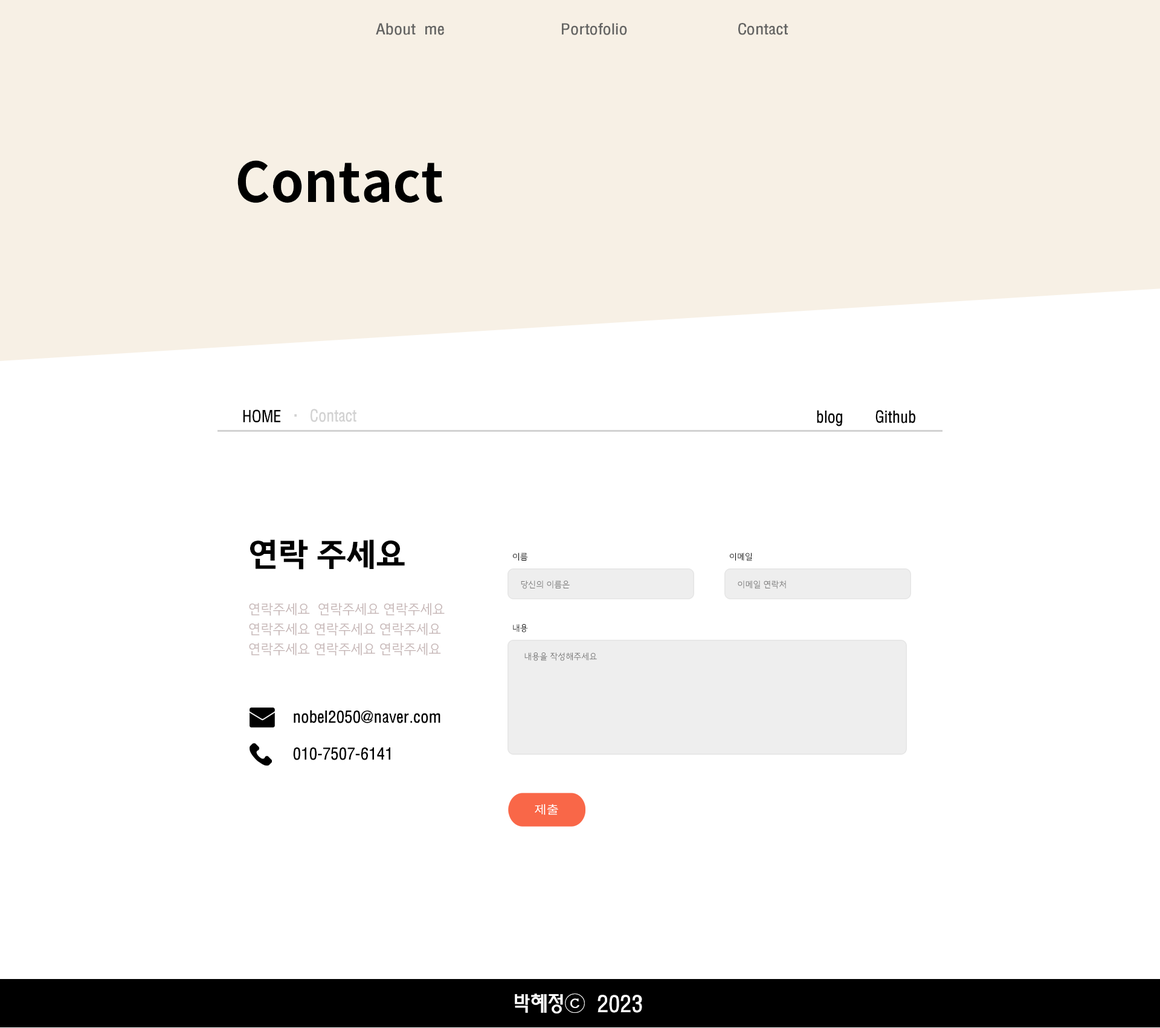
<style>
.page{position:relative;width:1160px;height:1028px;background:#ffffff}
.page>*{position:absolute;margin:0}
.t1{font:13.9px "MoeumTR-HM";letter-spacing:-0.01em;color:#636362;scale:1.14 1}
.t2{font:55px "NotoSansKR-Bold";letter-spacing:0.005em;color:#000000;scale:0.97 1}
.t3{font:15.1px "MoeumTR-HM";letter-spacing:-0.01em;color:#000000;scale:0.97 1}
.t4{font:15.1px "MoeumTR-HM";letter-spacing:-0.01em;color:#d2d2d2;scale:0.97 1}
.t5{font:33.2px "KimjungchulGothic-Bold";letter-spacing:-0.01em;color:#000000;text-transform:uppercase}
.t6{font:8.8px "KimjungchulGothic-Regular";letter-spacing:-0.01em;color:#010101}
.t7{font:8.8px "KimjungchulGothic-Regular";letter-spacing:-0.01em;color:#747373}
.t8{font:13.9px/20.1px "KimjungchulGothic-Regular";letter-spacing:-0.01em;color:#c8b9b9}
.t9{font:15.1px "MoeumTR-HM";letter-spacing:-0.01em;color:#000000}
.t10{font:21.2px "MoeumTR-HM";letter-spacing:-0.01em;color:#ffffff}
</style>
<div class="page">
<p class="t1" style="left:376px;top:23px;width:68px;height:12px">About me</p>
<p class="t1" style="left:562px;top:23px;width:65px;height:12px">Portofolio</p>
<p class="t1" style="left:739px;top:23px;width:50px;height:12px">Contact</p>
<p class="t2" style="left:238px;top:160px;width:205px;height:43px">Contact</p>
<p class="t3" style="left:243px;top:409px;width:38px;height:13px">HOME</p>
<p class="t4" style="left:294px;top:409px;width:63px;height:13px">·  Contact</p>
<p class="t3" style="left:817px;top:410px;width:99px;height:16px">blog    Github</p>
<p class="t5" style="left:250px;top:539px;width:155px;height:30px">연락 주세요</p>
<p class="t6" style="left:513px;top:552px;width:15px;height:8px">이름</p>
<p class="t6" style="left:730px;top:552px;width:23px;height:9px">이메일</p>
<p class="t7" style="left:521px;top:580px;width:49px;height:9px">당신의 이름은</p>
<p class="t7" style="left:738px;top:580px;width:48px;height:9px">이메일 연락처</p>
<p class="t8" style="left:249px;top:603px;width:196px;height:52px">연락주세요  연락주세요 연락주세요<br>연락주세요 연락주세요 연락주세요<br>연락주세요 연락주세요 연락주세요</p>
<p class="t6" style="left:513px;top:624px;width:15px;height:8px">내용</p>
<p class="t7" style="left:525px;top:652px;width:72px;height:9px">내용을 작성해주세요</p>
<p class="t9" style="left:294px;top:710px;width:147px;height:13px">nobel2050@naver.com</p>
<p class="t9" style="left:293px;top:747px;width:97px;height:13px">010-7507-6141</p>
<p class="t10" style="left:515px;top:993px;width:128px;height:20px">박혜정ⓒ 2023</p>
</div>
